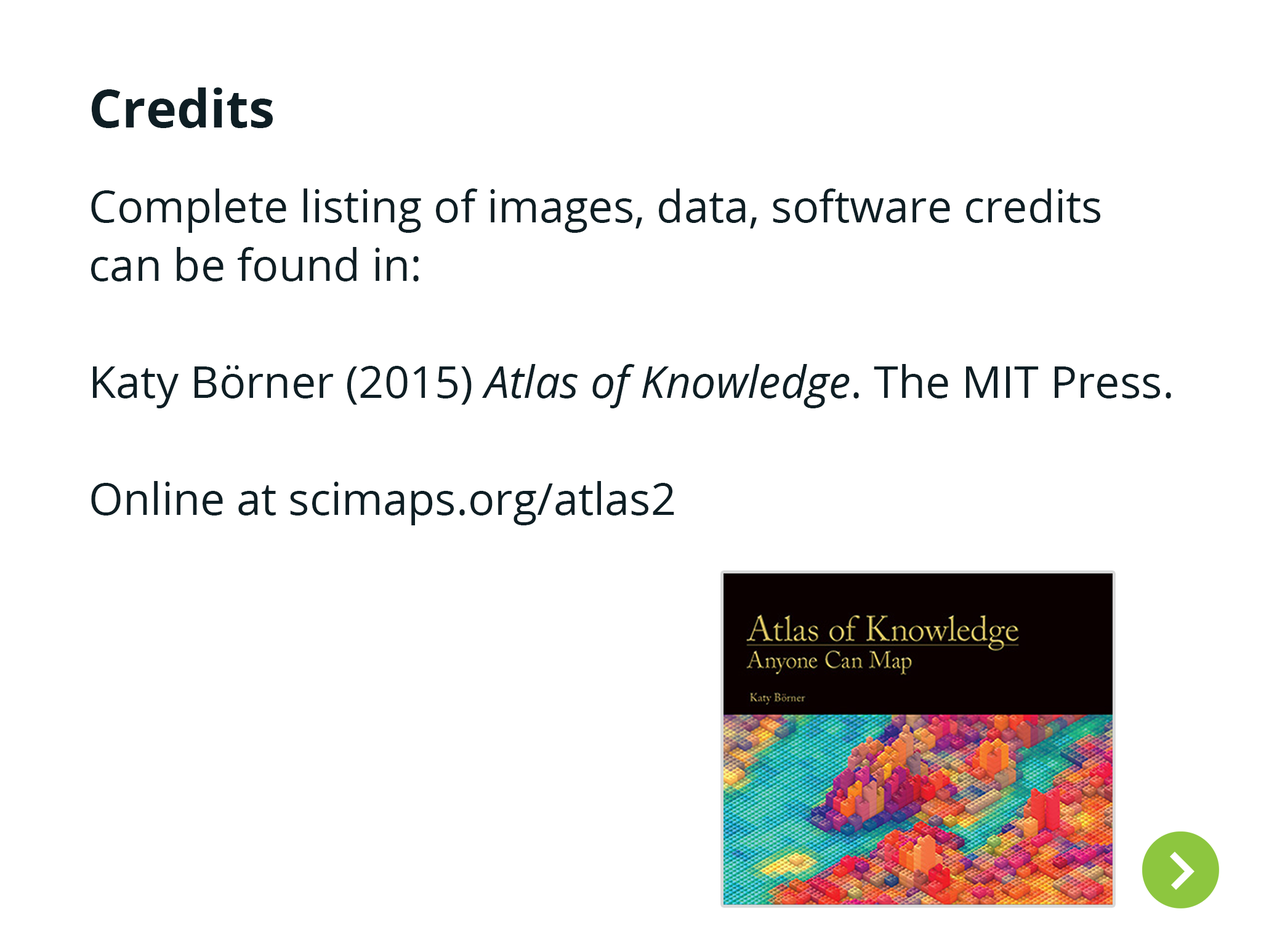
<style>
.page{position:relative;width:1261px;height:946px;background:#ffffff}
.page>*{position:absolute;margin:0}
.t1{font:44.3px/58.5px "OpenSans";color:#0e1e24}
.t2{font:52.3px/52.3px "OpenSans-Bold";color:#0e1e24}
.t3{font:44.3px/58.5px "OpenSans-Italic";color:#0e1e24}
</style>
<div class="page">
<p class="t1" style="left:91px;top:87px;width:1080px;height:438px"><span class="t2">Credits<br><br></span>Complete listing of images, data, software credits can be found in:<br> <br>Katy Börner (2015) <span class="t3">Atlas of Knowledge</span>. The MIT Press.<br><br>Online at scimaps.org/atlas2</p>
</div>
